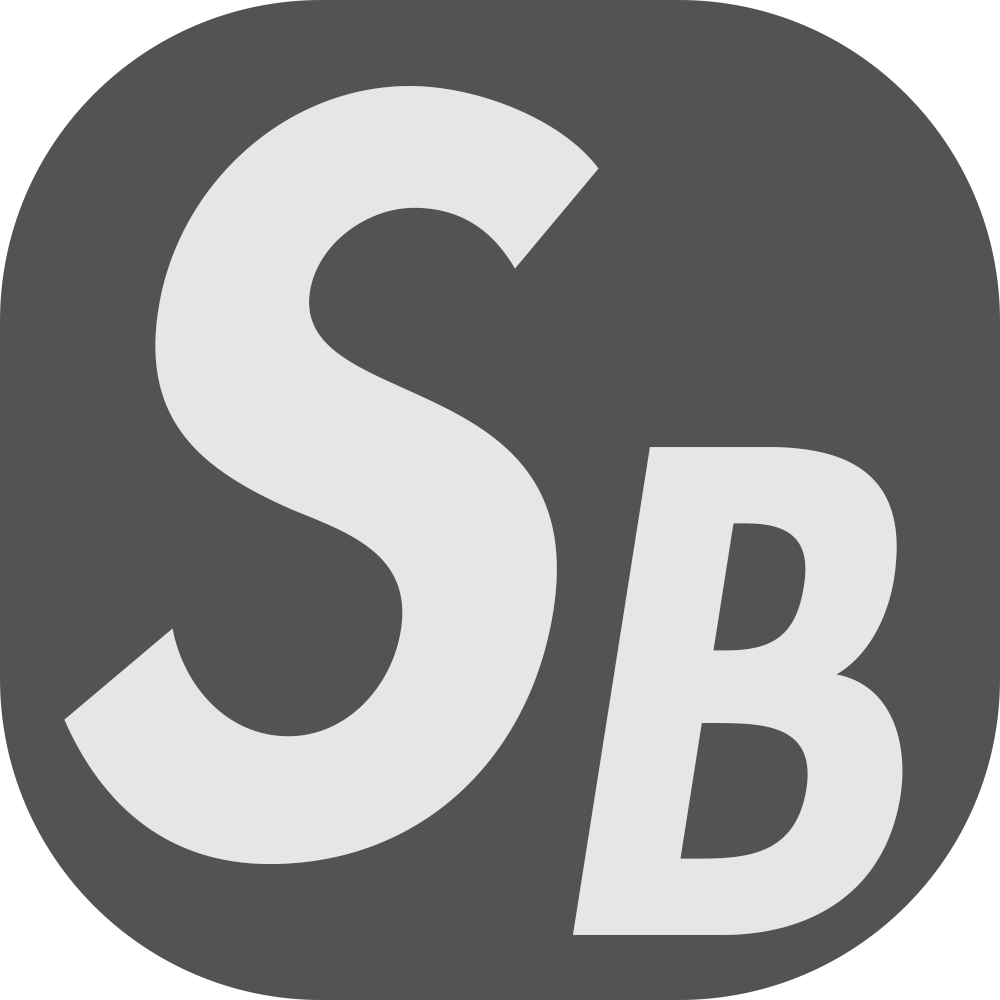
<style>
.page{position:relative;width:1000px;height:1000px;background:#535353}
.page>*{position:absolute;margin:0}
.t1{font:982px "FuturaStd-HeavyOblique";color:#e6e6e6}
.t2{font:647px "FuturaStd-HeavyOblique";color:#e6e6e6}
</style>
<div class="page">
<p class="t1" style="left:64px;top:86px;width:535px;height:779px">S</p>
<p class="t2" style="left:573px;top:447px;width:330px;height:488px">B</p>
</div>
